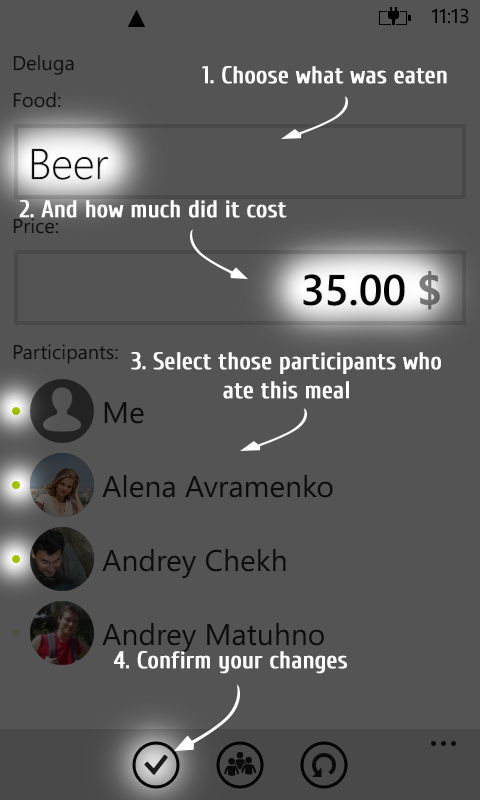
<style>
.page{position:relative;width:480px;height:800px;background:#545454}
.page>*{position:absolute;margin:0}
.t1{font:24px "Cuprum-Regular";color:#ffffff;font-weight:bold}
</style>
<div class="page">
<p class="t1" style="left:202px;top:66px;width:245px;height:18px">1. Choose what was eaten</p>
<p class="t1" style="left:19px;top:200px;width:268px;height:18px">2. And how much did it cost</p>
<p class="t1" style="left:131px;top:352px;width:310px;height:47px;text-align:center">3. Select those participants who ate this meal</p>
<p class="t1" style="left:114px;top:651px;width:233px;height:23px">4. Confirm your changes</p>
</div>
